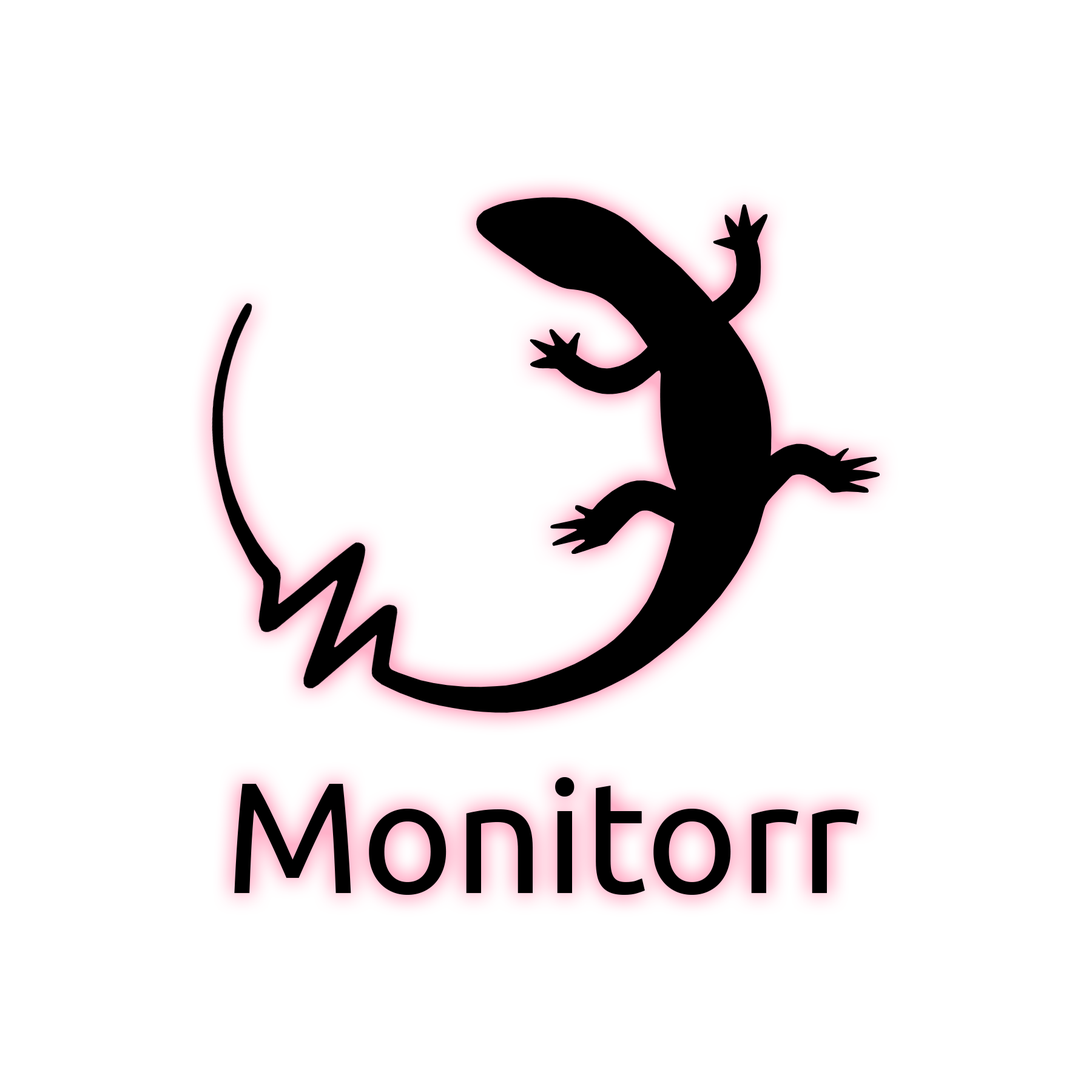
<style>
.page{position:relative;width:1092px;height:1092px;background:#ffffff}
.page>*{position:absolute;margin:0}
.t1{font:157.7px "Ubuntu";color:#000000}
</style>
<div class="page">
<p class="t1" style="left:234px;top:777px;width:625px;height:118px">Monitorr</p>
</div>
